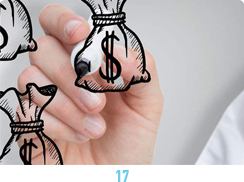
<style>
.page{position:relative;width:244px;height:182px}
.page>*{position:absolute;margin:0}
.t1{font:16px "DINCond-Black";color:#6acce8}
</style>
<div class="page">
<p class="t1" style="left:116px;top:170px;width:13px;height:12px">17</p>
</div>
